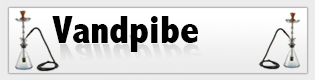
<style>
.page{position:relative;width:315px;height:80px;background:#edecec}
.page>*{position:absolute;margin:0}
.t1{font:40px "AbadiMT-CondensedExtraBold";color:#000000}
</style>
<div class="page">
<p class="t1" style="left:52px;top:16px;width:146px;height:36px">Vandpibe</p>
</div>
